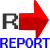
<style>
.page{position:relative;width:50px;height:50px;background:#ffffff}
.page>*{position:absolute;margin:0}
.t1{font:24.6px "WST_Engl";color:#343435}
.t2{font:14.3px "WST_Engl";color:#0d01ff;scale:0.75 1}
</style>
<div class="page">
<p class="t1" style="left:2px;top:13px;width:16px;height:16px">R</p>
<p class="t2" style="left:0px;top:38px;width:50px;height:10px">REPORT</p>
</div>
